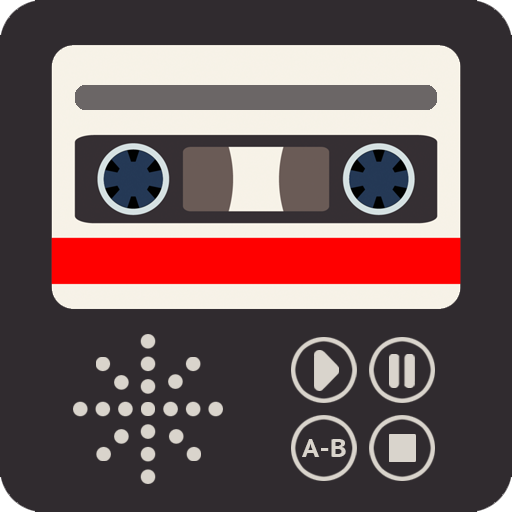
<style>
.page{position:relative;width:512px;height:512px;background:#302b2f}
.page>*{position:absolute;margin:0}
.t1{font:25.7px "PTSans-CaptionBold";letter-spacing:0.025em;color:#d9d4cc}
</style>
<div class="page">
<p class="t1" style="left:302px;top:439px;width:44px;height:18px">A-B</p>
</div>
